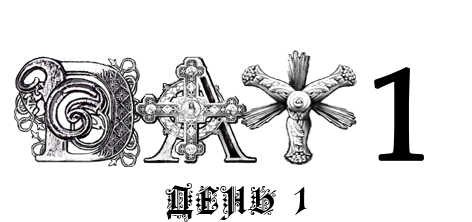
<style>
.page{position:relative;width:472px;height:222px;background:#ffffff}
.page>*{position:absolute;margin:0}
.t1{font:36px "FortunaGothicFlorishC";letter-spacing:0.05em;color:#000000}
</style>
<div class="page">
<p class="t1" style="left:165px;top:183px;width:142px;height:39px">ДЕНЬ 1</p>
</div>
